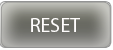
<style>
.page{position:relative;width:113px;height:50px}
.page>*{position:absolute;margin:0}
.t1{font:20px "MyriadPro-Regular";color:#fffdfd}
</style>
<div class="page">
<p class="t1" style="left:31px;top:18px;width:49px;height:14px">RESET</p>
</div>
